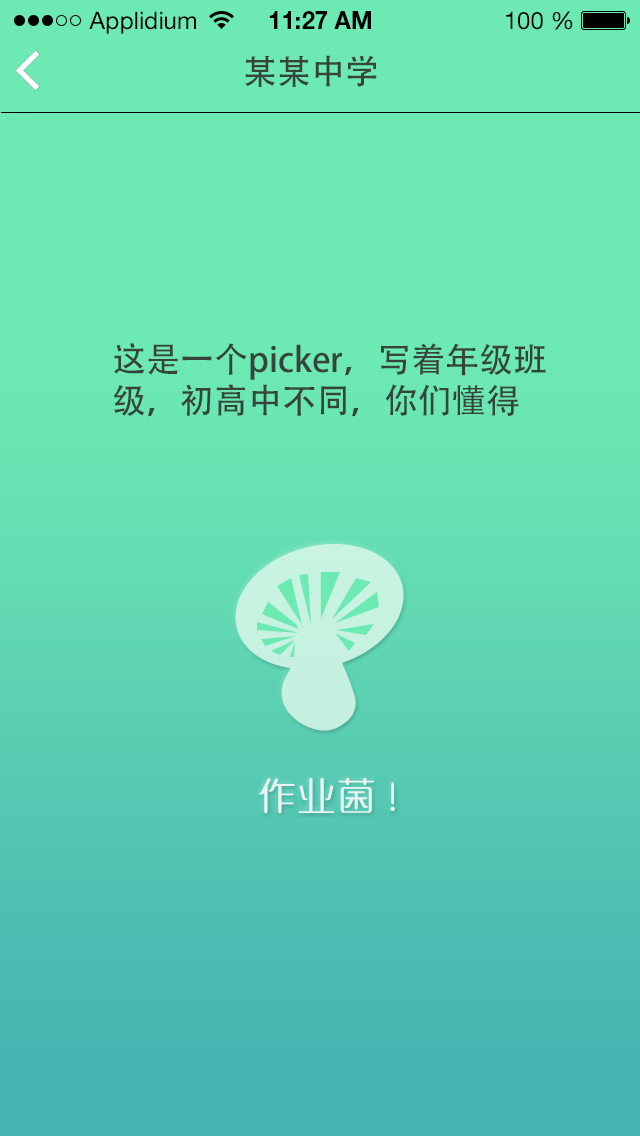
<style>
.page{position:relative;width:640px;height:1136px;background:#6de9b3}
.page>*{position:absolute;margin:0}
.t1{font:24px "HelveticaNeueLTStd-Roman";color:#000000}
.t2{font:24px "HelveticaNeueLTStd-Bd";color:#000000}
.t3{font:34px "AdobeHeitiStd-Regular";color:#36443b}
.t4{font:36px "MFYaYuan_Noncommercial-Regular";letter-spacing:0.1em;color:#fbfbfb}
</style>
<div class="page">
<p class="t1" style="left:89px;top:11px;width:107px;height:23px">Applidium</p>
<p class="t2" style="left:269px;top:11px;width:102px;height:18px">11:27 AM</p>
<p class="t1" style="left:506px;top:11px;width:67px;height:19px">100 %</p>
<p class="t3" style="left:245px;top:55px;width:132px;height:32px">某某中学</p>
<p class="t3" style="left:113px;top:343px;width:433px;height:74px">这是一个picker，写着年级班级，初高中不同，你们懂得</p>
<p class="t4" style="left:259px;top:777px;width:136px;height:37px;opacity:0.86">作业菌 !</p>
</div>
